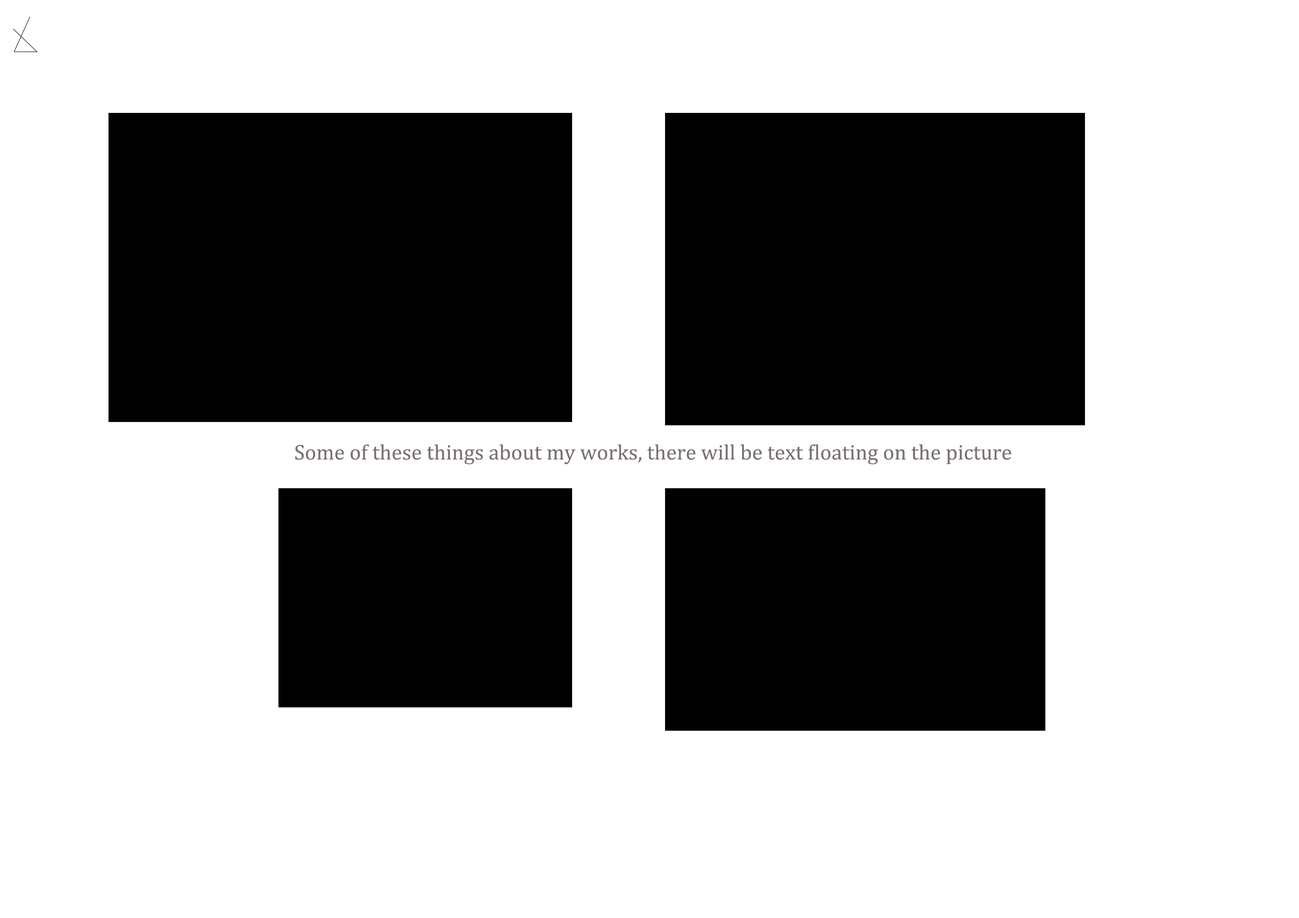
<style>
.page{position:relative;width:1299px;height:918px;background:#ffffff}
.page>*{position:absolute;margin:0}
.t1{font:21.6px "Cambria";color:#7b7171}
</style>
<div class="page">
<p class="t1" style="left:295px;top:444px;width:716px;height:21px">Some of these things about my works, there will be text floating on the picture</p>
</div>
